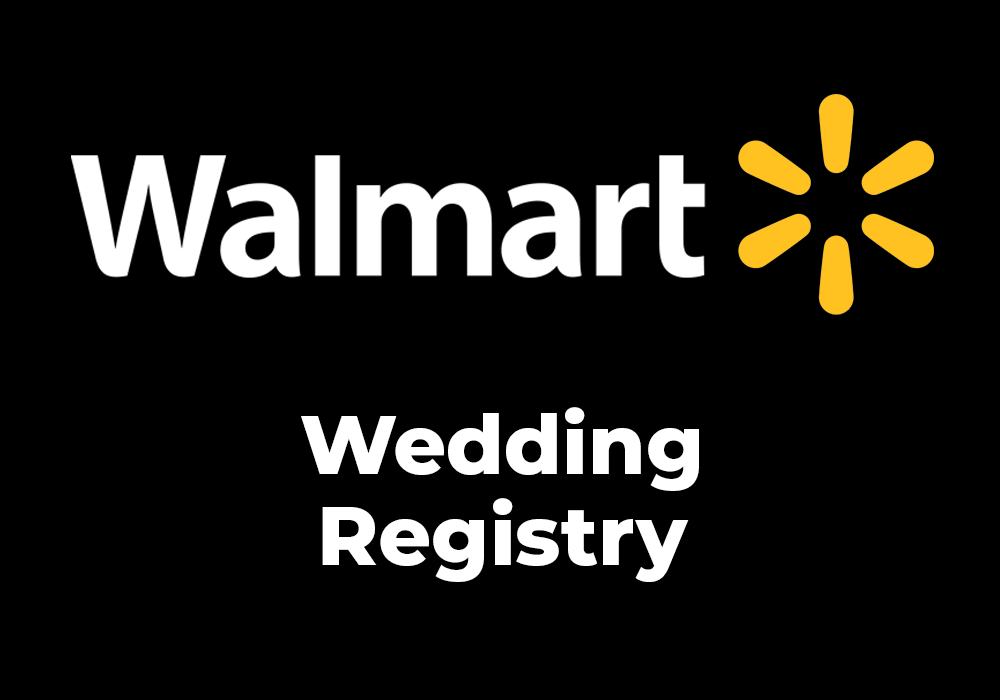
<style>
.page{position:relative;width:1000px;height:700px;background:#000000}
.page>*{position:absolute;margin:0}
.t1{font:82.7px/91px "Montserrat-ExtraBold";color:#ffffff}
.t2{font:82.7px/77.7px "Montserrat-ExtraBold";color:#ffffff}
</style>
<div class="page">
<p class="t1" style="left:301px;top:407px;width:398px;height:175px;text-align:center"><span class="t2">Wedding<br></span>Registry</p>
</div>
